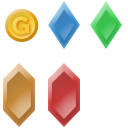
<style>
.page{position:relative;width:128px;height:128px;background:#ffffff}
.page>*{position:absolute;margin:0}
.t1{font:24.1px "Yapa-Regular";color:#f5cf39}
</style>
<div class="page">
<p class="t1" style="left:12px;top:16px;width:17px;height:19px">G</p>
</div>
